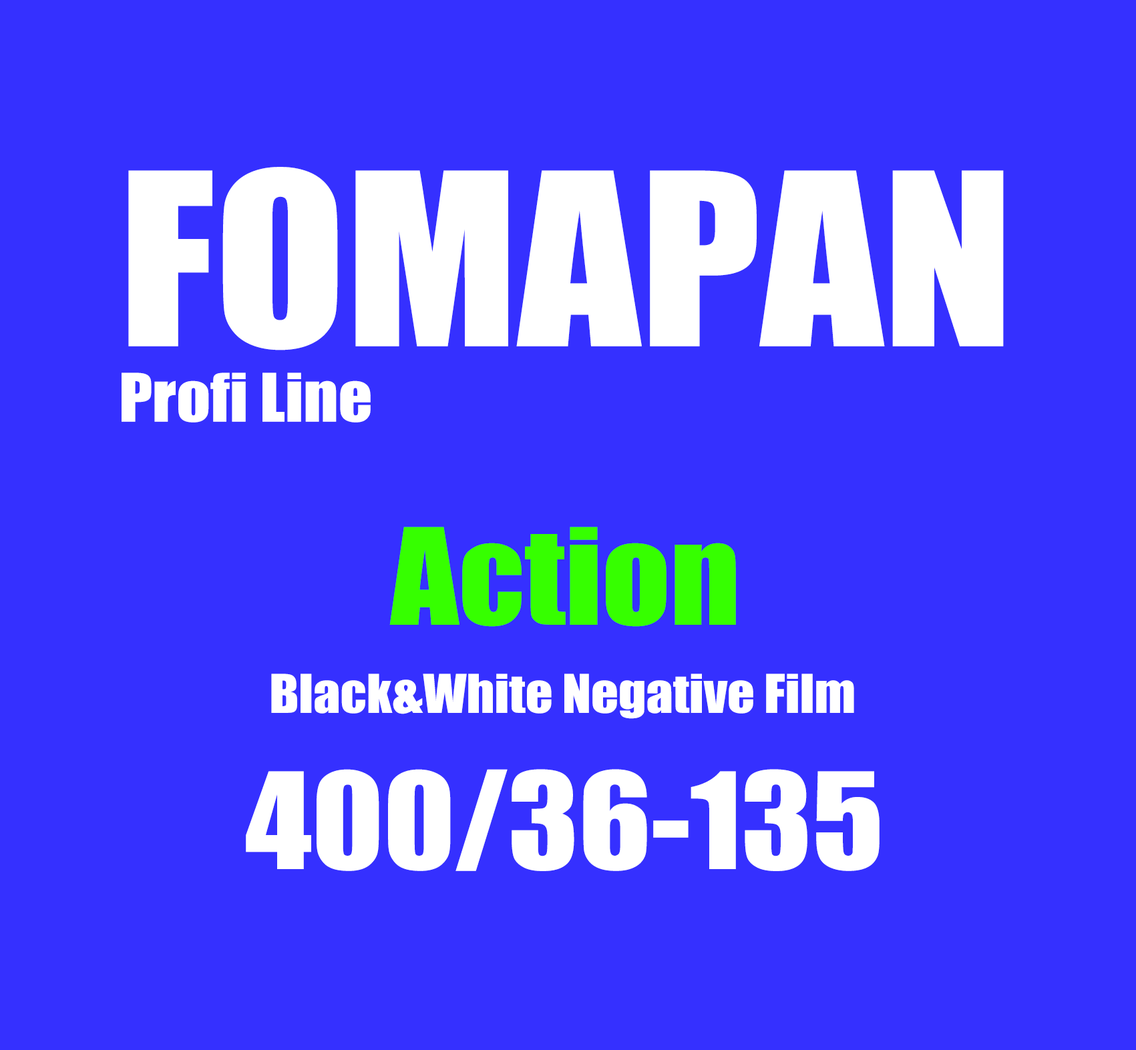
<style>
.page{position:relative;width:1136px;height:1050px;background:#3530ff}
.page>*{position:absolute;margin:0}
.t1{font:222.2px "Impact";color:#ffffff;scale:1.08 1}
.t2{font:61.7px "Impact";color:#ffffff;scale:1.08 1}
.t3{font:123.4px "Impact";color:#36ff00;scale:1.08 1}
.t4{font:49.4px "Impact";color:#ffffff;scale:1.08 1}
.t5{font:123.4px "Impact";color:#ffffff;scale:1.08 1}
</style>
<div class="page">
<p class="t1" style="left:128px;top:167px;width:875px;height:183px">FOMAPAN</p>
<p class="t2" style="left:121px;top:373px;width:250px;height:50px">Profi Line</p>
<p class="t3" style="left:389px;top:527px;width:347px;height:100px">Action</p>
<p class="t4" style="left:271px;top:674px;width:583px;height:45px">Black&amp;White Negative Film</p>
<p class="t5" style="left:246px;top:769px;width:633px;height:102px">400/36-135</p>
</div>
